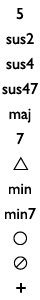
<style>
.page{position:relative;width:40px;height:300px;background:#ffffff}
.page>*{position:absolute;margin:0}
.t1{font:16px "GillSansMT";color:#000000}
.t2{font:20px "GillSansMT";color:#000000}
</style>
<div class="page">
<p class="t1" style="left:16px;top:8px;width:8px;height:12px">5</p>
<p class="t1" style="left:6px;top:32px;width:28px;height:13px">sus2</p>
<p class="t1" style="left:6px;top:57px;width:28px;height:13px">sus4</p>
<p class="t1" style="left:2px;top:82px;width:36px;height:13px">sus47</p>
<p class="t1" style="left:9px;top:108px;width:22px;height:15px">maj</p>
<p class="t1" style="left:16px;top:133px;width:8px;height:12px">7</p>
<p class="t1" style="left:9px;top:183px;width:22px;height:11px">min</p>
<p class="t1" style="left:5px;top:208px;width:31px;height:12px">min7</p>
<p class="t2" style="left:16px;top:283px;width:10px;height:10px">+</p>
</div>
